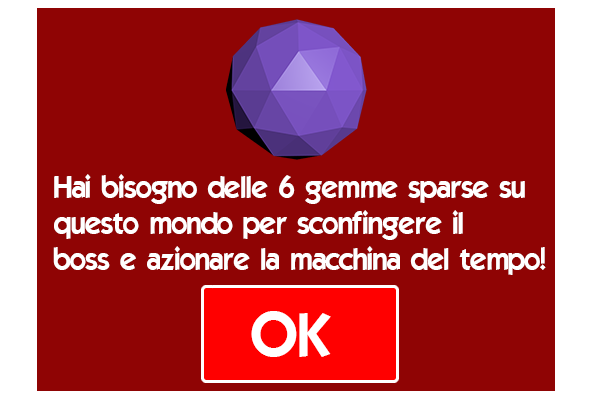
<style>
.page{position:relative;width:600px;height:400px;background:#8f0404}
.page>*{position:absolute;margin:0}
.t1{font:30px "ELEGANCE";color:#ffffff}
</style>
<div class="page">
<p class="t1" style="left:53px;top:174px;width:493px;height:101px">Hai bisogno delle 6 gemme sparse su<br>questo mondo per sconfingere il<br>boss e azionare la macchina del tempo!</p>
</div>
